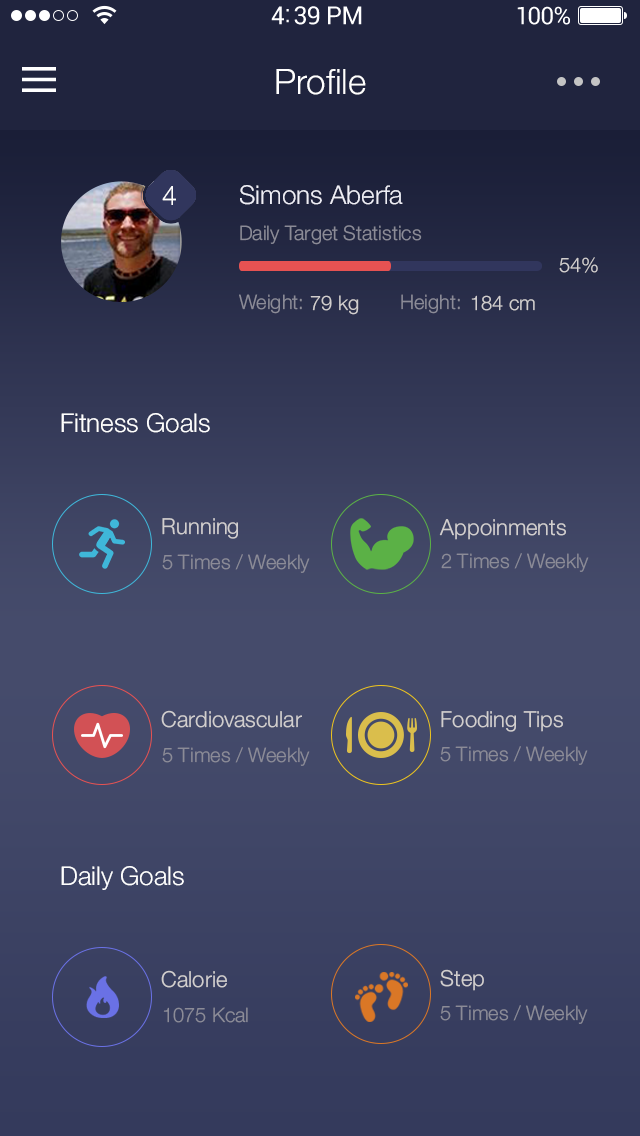
<style>
.page{position:relative;width:640px;height:1136px}
.page>*{position:absolute;margin:0}
.t1{font:35px "HelveticaNeue-Light";color:#ffffff}
.t2{font:26px "HelveticaNeue-Light";color:#eeeef6}
.t3{font:27px "HelveticaNeue-Light";color:#ffffff}
.t4{font:20px "HelveticaNeue-Light";color:#8b8b97}
.t5{font:20.1px "HelveticaNeue-Light";color:#d1cece}
.t6{font:26px "HelveticaNeue-Light";color:#ffffff}
.t7{font:22px "HelveticaNeue-Light";color:#d1cece}
</style>
<div class="page">
<p class="t1" style="left:276px;top:69px;width:90px;height:26px">Profile</p>
<p class="t2" style="left:240px;top:185px;width:163px;height:20px">Simons Aberfa</p>
<p class="t3" style="left:162px;top:186px;width:14px;height:19px">4</p>
<p class="t4" style="left:240px;top:225px;width:182px;height:20px">Daily Target Statistics</p>
<p class="t5" style="left:559px;top:257px;width:39px;height:16px">54%</p>
<p class="t4" style="left:239px;top:294px;width:63px;height:20px">Weight:</p>
<p class="t4" style="left:401px;top:294px;width:59px;height:20px">Height:</p>
<p class="t5" style="left:310px;top:295px;width:49px;height:20px">79 kg</p>
<p class="t5" style="left:471px;top:295px;width:64px;height:16px">184 cm</p>
<p class="t6" style="left:61px;top:413px;width:149px;height:20px">Fitness Goals</p>
<p class="t7" style="left:162px;top:518px;width:76px;height:21px">Running</p>
<p class="t7" style="left:439px;top:519px;width:127px;height:21px">Appoinments</p>
<p class="t4" style="left:162px;top:554px;width:148px;height:19px">5 Times / Weekly</p>
<p class="t4" style="left:441px;top:553px;width:148px;height:19px">2 Times / Weekly</p>
<p class="t7" style="left:161px;top:710px;width:141px;height:18px">Cardiovascular</p>
<p class="t7" style="left:441px;top:711px;width:122px;height:21px">Fooding Tips</p>
<p class="t4" style="left:162px;top:747px;width:148px;height:19px">5 Times / Weekly</p>
<p class="t4" style="left:440px;top:746px;width:148px;height:19px">5 Times / Weekly</p>
<p class="t6" style="left:61px;top:866px;width:123px;height:24px">Daily Goals</p>
<p class="t7" style="left:161px;top:970px;width:66px;height:18px">Calorie</p>
<p class="t7" style="left:440px;top:969px;width:44px;height:22px">Step</p>
<p class="t4" style="left:163px;top:1007px;width:85px;height:16px">1075 Kcal</p>
<p class="t4" style="left:440px;top:1005px;width:148px;height:19px">5 Times / Weekly</p>
</div>
